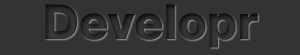
<style>
.page{position:relative;width:300px;height:55px;background:#333333}
.page>*{position:absolute;margin:0}
.t1{font:48px "HelveticaNeueLTPro-Hv";color:#2c2c2c}
</style>
<div class="page">
<p class="t1" style="left:45px;top:4px;width:213px;height:44px">Developr</p>
</div>
